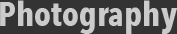
<style>
.page{position:relative;width:177px;height:34px;background:#333333}
.page>*{position:absolute;margin:0}
.t1{font:34.3px "AvenirNextCondensed-Bold";color:#cbcbcb}
</style>
<div class="page">
<p class="t1" style="left:0px;top:0px;width:178px;height:34px">Photography</p>
</div>
